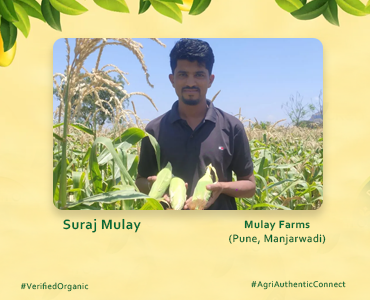
<style>
.page{position:relative;width:370px;height:300px}
.page>*{position:absolute;margin:0}
.t1{font:14.2px "Corbel-Bold";letter-spacing:0.04em;color:#066a36}
.t2{font:11.1px "Corbel";letter-spacing:0.04em;color:#066a36}
.t3{font:11.1px "Corbel-Bold";letter-spacing:0.04em;color:#066a36}
.t4{font:8.8px "Corbel";letter-spacing:0.04em}
</style>
<div class="page">
<p class="t1" style="left:63px;top:218px;width:78px;height:15px">Suraj Mulay</p>
<p class="t2" style="left:229px;top:220px;width:97px;height:25px;text-align:center"><span class="t3">Mulay Farms<br></span>(Pune, Manjarwadi)</p>
<p class="t4" style="left:251px;top:280px;width:95px;height:10px">#AgriAuthenticConnect</p>
<p class="t4" style="left:21px;top:282px;width:68px;height:10px">#VerifiedOrganic</p>
</div>
